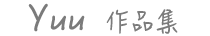
<style>
.page{position:relative;width:210px;height:36px;background:#ffffff}
.page>*{position:absolute;margin:0}
.t1{font:36px "HanziPenSC-W5";color:#7b7b7b}
.t2{font:24px "HanziPenSC-W5";color:#7b7b7b}
</style>
<div class="page">
<p class="t1" style="left:28px;top:3px;width:150px;height:31px">Yuu  <span class="t2">作品集</span></p>
</div>
